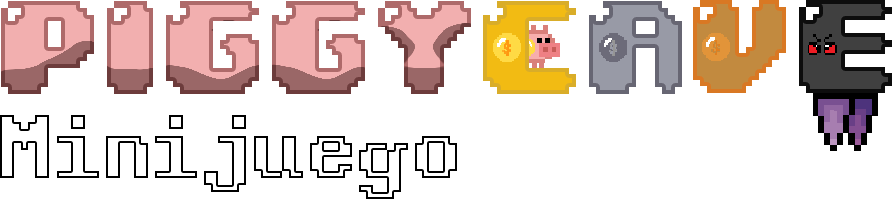
<style>
.page{position:relative;width:892px;height:199px;background:#ffffff}
.page>*{position:absolute;margin:0}
.t1{font:112.5px "04b30"}
.t2{font:112.5px "04b30";color:#c28a3f}
.t3{font:112.5px "04b30";color:#404040}
.t4{font:112.5px "Windows-Command-Prompt"}
</style>
<div class="page">
<p class="t1" style="left:1px;top:1px;width:470px;height:93px">PIGGY</p>
<p class="t1" style="left:483px;top:1px;width:93px;height:93px">C</p>
<p class="t1" style="left:589px;top:1px;width:93px;height:93px">A</p>
<p class="t2" style="left:693px;top:0px;width:93px;height:93px">V</p>
<p class="t3" style="left:799px;top:0px;width:93px;height:93px">E</p>
<p class="t4" style="left:0px;top:115px;width:457px;height:84px">Minijuego</p>
</div>
